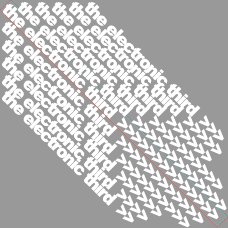
<style>
.page{position:relative;width:228px;height:228px;background:#999999}
.page>*{position:absolute;margin:0}
.t1{font:17px "Arial-Black";letter-spacing:-0.08em;color:#ffffff}
</style>
<div class="page">
<p class="t1" style="left:85px;top:2px;width:139px;height:139px;rotate:45deg">the electronic third  &gt;&gt;&gt;</p>
<p class="t1" style="left:2px;top:91px;width:132px;height:132px;rotate:45deg">the electronic third  &gt;&gt;</p>
</div>
